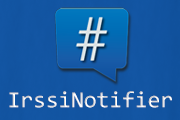
<style>
.page{position:relative;width:180px;height:120px}
.page>*{position:absolute;margin:0}
.t1{font:23px "Consolas"}
</style>
<div class="page">
<p class="t1" style="left:9px;top:91px;width:163px;height:17px">IrssiNotifier</p>
</div>
